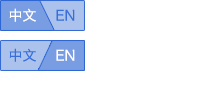
<style>
.page{position:relative;width:200px;height:100px;background:#ffffff}
.page>*{position:absolute;margin:0}
.t1{font:14px "HiraginoSansGB-W3";color:#ffffff;text-transform:uppercase}
.t2{font:14px "HiraginoSansGB-W3";color:#376eda;text-transform:uppercase}
</style>
<div class="page">
<p class="t1" style="left:9px;top:8px;width:27px;height:14px">中文</p>
<p class="t2" style="left:56px;top:9px;width:19px;height:12px">en</p>
<p class="t2" style="left:9px;top:48px;width:27px;height:14px">中文</p>
<p class="t1" style="left:56px;top:49px;width:19px;height:12px">en</p>
</div>
